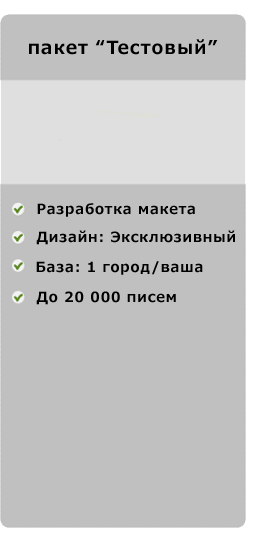
<style>
.page{position:relative;width:260px;height:550px;background:#c0c0c0}
.page>*{position:absolute;margin:0}
.t1{font:18px "Meiryo-Bold";letter-spacing:0.06em;color:#000000;font-variant:small-caps}
.t2{font:14px "Meiryo-Bold";letter-spacing:0.06em;color:#010101;font-variant:small-caps}
.t3{font:14px "Meiryo-Bold";letter-spacing:0.06em;color:#000000;font-variant:small-caps}
</style>
<div class="page">
<p class="t1" style="left:29px;top:39px;width:189px;height:16px">пакет “Тестовый”</p>
<p class="t2" style="left:37px;top:203px;width:158px;height:14px">Разработка макета</p>
<p class="t3" style="left:36px;top:230px;width:199px;height:15px">Дизайн: Эксклюзивный</p>
<p class="t3" style="left:36px;top:261px;width:167px;height:14px">База: 1 город/ваша</p>
<p class="t3" style="left:36px;top:291px;width:140px;height:14px">До 20 000 писем</p>
</div>
